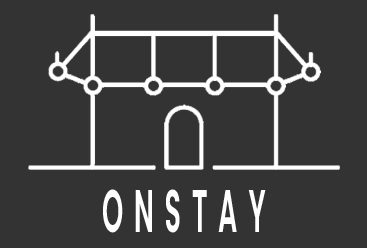
<style>
.page{position:relative;width:367px;height:248px;background:#333333}
.page>*{position:absolute;margin:0}
.t1{font:60px "Poppins-SemiBold";letter-spacing:0.4em;color:#ffffff;scale:0.45 1}
</style>
<div class="page">
<p class="t1" style="left:103px;top:189px;width:163px;height:44px">ONSTAY</p>
</div>
